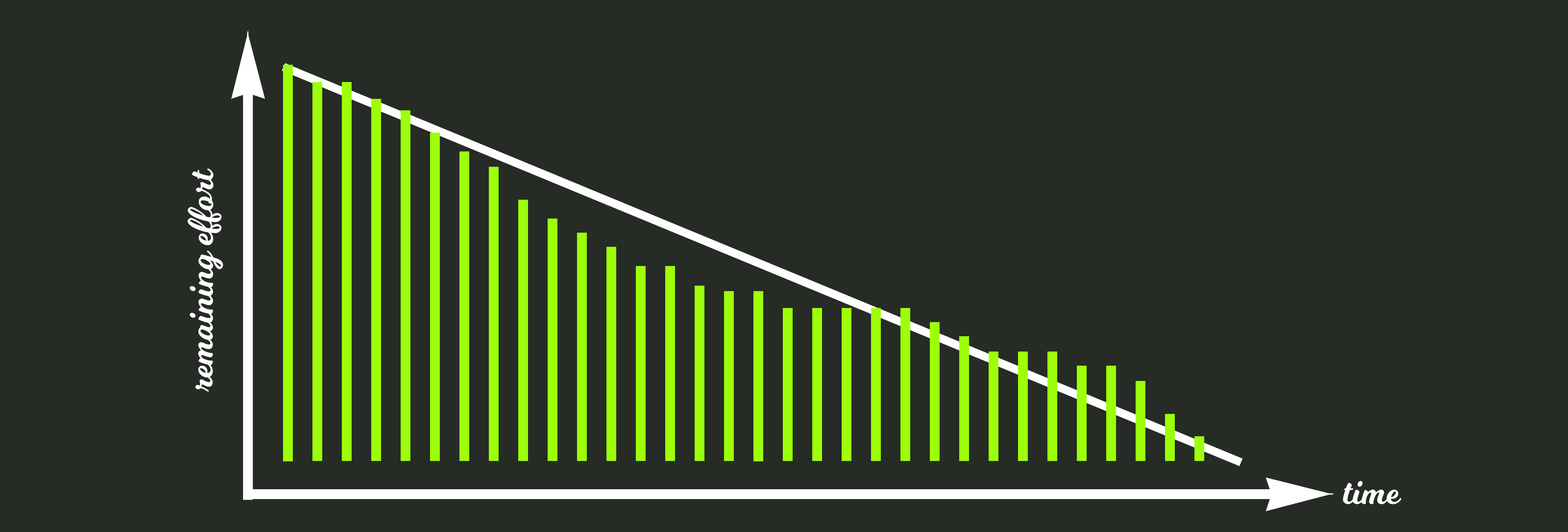
<style>
.page{position:relative;width:1568px;height:532px;background:#262b25}
.page>*{position:absolute;margin:0}
.t1{font:36.1px "Milkshake";color:#ffffff}
</style>
<div class="page">
<p class="t1" style="left:187px;top:168px;width:36px;height:224px;rotate:-90deg">remaining effort</p>
<p class="t1" style="left:1343px;top:481px;width:58px;height:23px">time</p>
</div>
